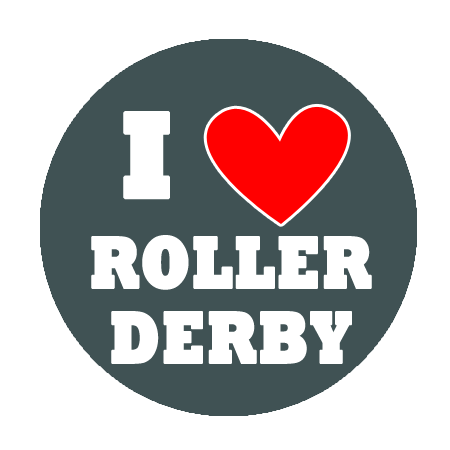
<style>
.page{position:relative;width:450px;height:450px;background:#ffffff}
.page>*{position:absolute;margin:0}
.t1{font:125px "Rockwell-ExtraBold";color:#ffffff;font-weight:bold;scale:0.9 1}
.t2{font:75px/75px "Rockwell-ExtraBold";color:#ffffff;font-weight:bold;scale:0.78 1}
</style>
<div class="page">
<p class="t1" style="left:123px;top:111px;width:47px;height:89px">I</p>
<p class="t2" style="left:91px;top:235px;width:281px;height:129px;text-align:center">ROLLER DERBY</p>
</div>
